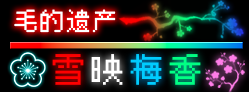
<style>
.page{position:relative;width:249px;height:92px}
.page>*{position:absolute;margin:0}
.t1{font:26.1px "HYPixel-11px-U";color:#ffffff}
.t2{font:36.1px "HYPixel-11px-U";color:#ff0000}
.t3{font:36.1px "HYPixel-11px-U";color:#ffffff}
.t4{font:36.1px "HYPixel-11px-U";color:#00ccff}
.t5{font:36.1px "HYPixel-11px-U";color:#00ff84}
</style>
<div class="page">
<p class="t1" style="left:14px;top:9px;width:102px;height:24px">毛的遗产</p>
<p class="t2" style="left:52px;top:54px;width:32px;height:31px">雪</p>
<p class="t3" style="left:91px;top:54px;width:32px;height:31px">映</p>
<p class="t4" style="left:130px;top:54px;width:32px;height:31px">梅</p>
<p class="t5" style="left:169px;top:54px;width:32px;height:31px">香</p>
</div>
